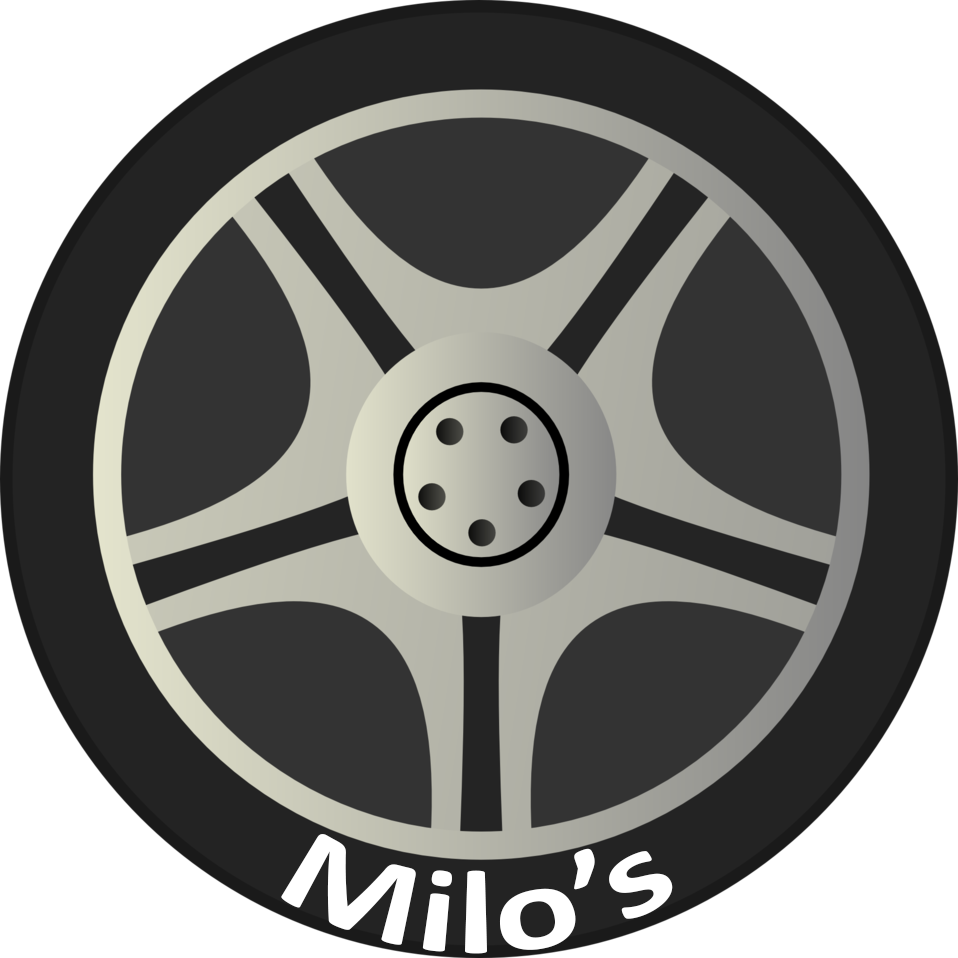
<style>
.page{position:relative;width:958px;height:958px;background:#ffffff}
.page>*{position:absolute;margin:0}
.t1{font:122px "Calibri-Bold";color:#ffffff}
</style>
<div class="page">
<p class="t1" style="left:281px;top:834px;width:392px;height:120px">Milo’s</p>
</div>
